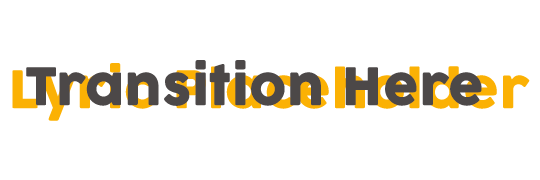
<style>
.page{position:relative;width:540px;height:180px;background:#ffffff}
.page>*{position:absolute;margin:0}
.t1{font:50px "CocogoosePro";font-weight:bold}
.t2{font:50px "CocogoosePro";color:#4c4848;font-weight:bold}
</style>
<div class="page">
<p class="t1" style="left:12px;top:63px;width:518px;height:58px">Lyric Placeholder</p>
<p class="t2" style="left:26px;top:60px;width:456px;height:46px">Transition Here</p>
</div>
